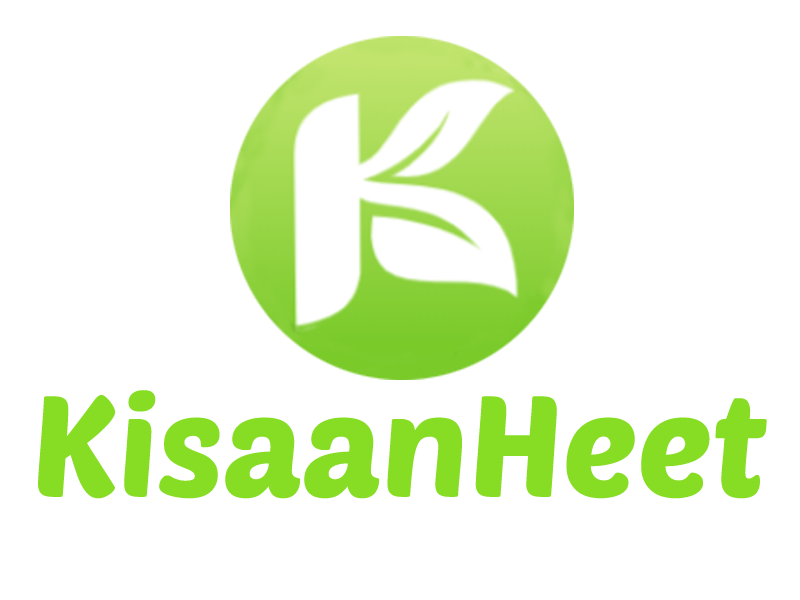
<style>
.page{position:relative;width:800px;height:600px;background:#ffffff}
.page>*{position:absolute;margin:0}
.t1{font:141.2px "PoetsenOne-Regular";color:#86dd24}
</style>
<div class="page">
<p class="t1" style="left:38px;top:390px;width:729px;height:109px">KisaanHeet</p>
</div>
